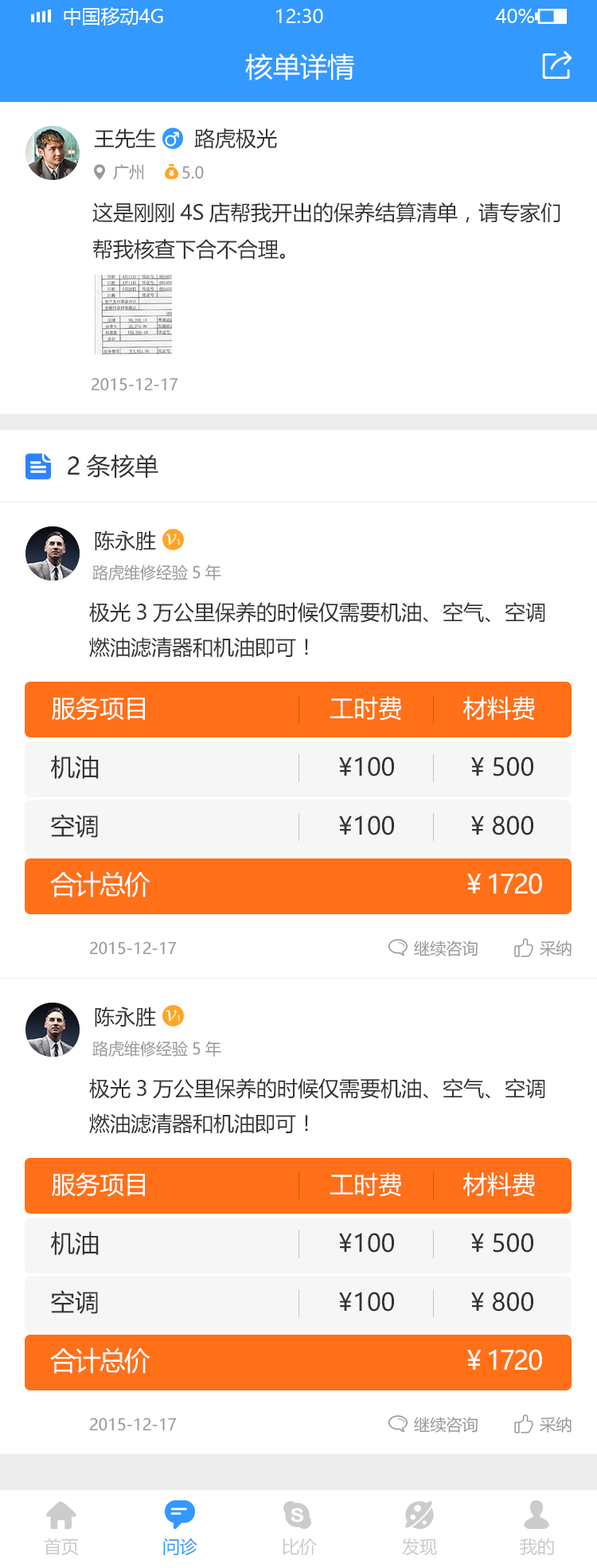
<style>
.page{position:relative;width:597px;height:1568px;background:#ffffff}
.page>*{position:absolute;margin:0}
.t1{font:27.1px "MicrosoftYaHei";color:#ffffff}
.t2{font:20.7px "MicrosoftYaHei";color:#333333}
.t3{font:15.9px "MicrosoftYaHei";color:#999999}
.t4{font:23.9px "MicrosoftYaHei";color:#333333}
.t5{font:20.7px/35px "MicrosoftYaHei";color:#333333}
.t6{font:24.3px "MicrosoftYaHei";color:#ffffff}
.t7{font:24.3px "MicrosoftYaHei";color:#333333}
.t8{font:26.1px "MicrosoftYaHei";letter-spacing:-0.06em;color:#ffffff}
.t9{font:17.5px "MicrosoftYaHei";color:#cccccc}
.t10{font:17.5px "MicrosoftYaHei";color:#3399ff}
</style>
<div class="page">
<p class="t1" style="left:245px;top:53px;width:109px;height:27px">核单详情</p>
<p class="t2" style="left:94px;top:128px;width:62px;height:21px">王先生</p>
<p class="t2" style="left:94px;top:128px;width:62px;height:21px">王先生</p>
<p class="t2" style="left:194px;top:128px;width:83px;height:21px">路虎极光</p>
<p class="t2" style="left:194px;top:128px;width:83px;height:21px">路虎极光</p>
<p class="t3" style="left:113px;top:164px;width:31px;height:16px">广州</p>
<p class="t3" style="left:113px;top:164px;width:31px;height:16px">广州</p>
<p class="t3" style="left:182px;top:166px;width:22px;height:13px">5.0</p>
<p class="t3" style="left:182px;top:166px;width:22px;height:13px">5.0</p>
<p class="t2" style="left:92px;top:202px;width:469px;height:58px">这是刚刚4S店帮我开出的保养结算清单，请专家们<br>帮我核查下合不合理。</p>
<p class="t3" style="left:92px;top:377px;width:86px;height:14px">2015-12-17</p>
<p class="t3" style="left:92px;top:377px;width:86px;height:14px">2015-12-17</p>
<p class="t4" style="left:68px;top:454px;width:90px;height:24px">2条核单</p>
<p class="t2" style="left:95px;top:530px;width:61px;height:21px">陈永胜</p>
<p class="t3" style="left:92px;top:565px;width:129px;height:16px">路虎维修经验5年</p>
<p class="t5" style="left:89px;top:602px;width:456px;height:56px">极光3万公里保养的时候仅需要机油、空气、空调<br>燃油滤清器和机油即可！</p>
<p class="t6" style="left:52px;top:696px;width:93px;height:25px">服务项目</p>
<p class="t6" style="left:330px;top:696px;width:71px;height:25px">工时费</p>
<p class="t6" style="left:463px;top:696px;width:72px;height:25px">材料费</p>
<p class="t7" style="left:51px;top:755px;width:48px;height:24px">机油</p>
<p class="t7" style="left:339px;top:757px;width:55px;height:19px">¥100</p>
<p class="t7" style="left:471px;top:757px;width:63px;height:19px">¥ 500</p>
<p class="t7" style="left:51px;top:814px;width:47px;height:24px">空调</p>
<p class="t7" style="left:339px;top:815px;width:55px;height:20px">¥100</p>
<p class="t7" style="left:471px;top:815px;width:63px;height:20px">¥ 800</p>
<p class="t7" style="left:471px;top:815px;width:63px;height:20px">¥ 800</p>
<p class="t8" style="left:50px;top:871px;width:101px;height:26px">合计总价</p>
<p class="t8" style="left:467px;top:873px;width:75px;height:21px">¥ 1720</p>
<p class="t3" style="left:90px;top:941px;width:87px;height:14px">2015-12-17</p>
<p class="t3" style="left:414px;top:940px;width:64px;height:16px">继续咨询</p>
<p class="t3" style="left:540px;top:940px;width:32px;height:16px">采纳</p>
<p class="t2" style="left:95px;top:1007px;width:61px;height:20px">陈永胜</p>
<p class="t3" style="left:92px;top:1041px;width:129px;height:16px">路虎维修经验5年</p>
<p class="t5" style="left:89px;top:1078px;width:456px;height:56px">极光3万公里保养的时候仅需要机油、空气、空调<br>燃油滤清器和机油即可！</p>
<p class="t6" style="left:52px;top:1172px;width:93px;height:25px">服务项目</p>
<p class="t6" style="left:330px;top:1172px;width:71px;height:25px">工时费</p>
<p class="t6" style="left:463px;top:1172px;width:72px;height:25px">材料费</p>
<p class="t7" style="left:51px;top:1231px;width:48px;height:24px">机油</p>
<p class="t7" style="left:339px;top:1233px;width:55px;height:20px">¥100</p>
<p class="t7" style="left:471px;top:1233px;width:63px;height:20px">¥ 500</p>
<p class="t7" style="left:51px;top:1290px;width:47px;height:24px">空调</p>
<p class="t7" style="left:339px;top:1292px;width:55px;height:20px">¥100</p>
<p class="t7" style="left:471px;top:1292px;width:63px;height:20px">¥ 800</p>
<p class="t7" style="left:471px;top:1292px;width:63px;height:20px">¥ 800</p>
<p class="t8" style="left:50px;top:1347px;width:101px;height:27px">合计总价</p>
<p class="t8" style="left:467px;top:1349px;width:75px;height:22px">¥ 1720</p>
<p class="t3" style="left:90px;top:1417px;width:87px;height:14px">2015-12-17</p>
<p class="t3" style="left:414px;top:1417px;width:64px;height:16px">继续咨询</p>
<p class="t3" style="left:540px;top:1417px;width:32px;height:16px">采纳</p>
<p class="t9" style="left:44px;top:1538px;width:35px;height:17px">首页</p>
<p class="t10" style="left:163px;top:1538px;width:34px;height:17px">问诊</p>
<p class="t9" style="left:283px;top:1538px;width:34px;height:17px">比价</p>
<p class="t9" style="left:402px;top:1538px;width:35px;height:17px">发现</p>
<p class="t9" style="left:520px;top:1538px;width:34px;height:17px">我的</p>
</div>
